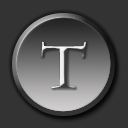
<style>
.page{position:relative;width:128px;height:128px;background:#333333}
.page>*{position:absolute;margin:0}
.t1{font:60px "CharlemagneStd-Bold"}
</style>
<div class="page">
<p class="t1" style="left:41px;top:41px;width:45px;height:47px">T</p>
</div>
